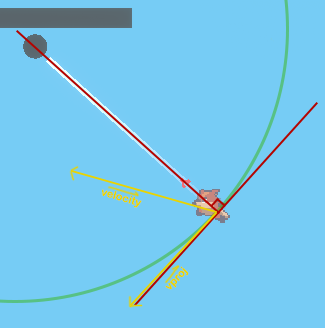
<style>
.page{position:relative;width:325px;height:328px;background:#76ccf5}
.page>*{position:absolute;margin:0}
.t1{font:11px "ArialRoundedMTBold";color:#ead300}
</style>
<div class="page">
<p class="t1" style="left:102px;top:189px;width:40px;height:19px;rotate:16deg">velocity</p>
<p class="t1" style="left:165px;top:266px;width:24px;height:24px;rotate:-47deg">vproj</p>
</div>
